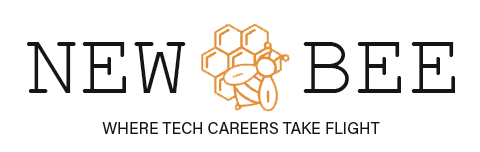
<style>
.page{position:relative;width:480px;height:152px;background:#ffffff}
.page>*{position:absolute;margin:0}
.t1{font:90px "CourierNewPSMT";color:#151515}
.t2{font:16px "AcuminPro-Regular";color:#151515}
</style>
<div class="page">
<p class="t1" style="left:27px;top:42px;width:159px;height:51px">NEW</p>
<p class="t1" style="left:303px;top:42px;width:152px;height:51px">BEE</p>
<p class="t2" style="left:102px;top:122px;width:278px;height:12px">WHERE TECH CAREERS TAKE FLIGHT</p>
</div>
